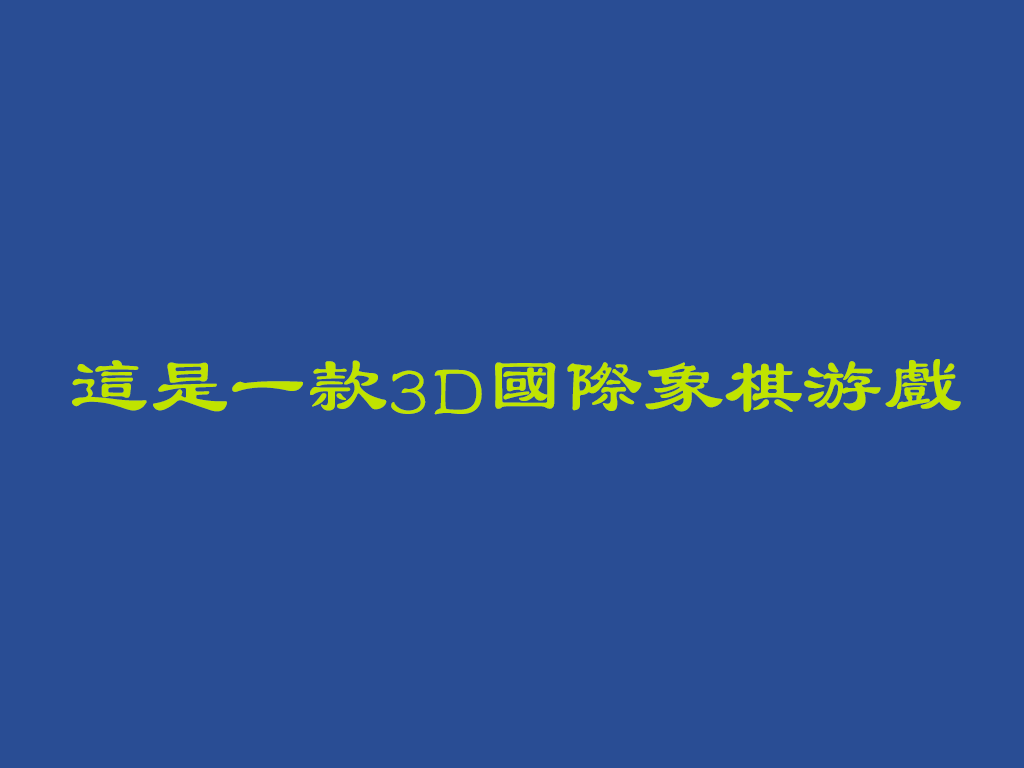
<style>
.page{position:relative;width:1024px;height:768px;background:#294d94}
.page>*{position:absolute;margin:0}
.t1{font:80px "FZLSFW--GB1-0";color:#c0e300}
</style>
<div class="page">
<p class="t1" style="left:72px;top:359px;width:889px;height:56px">这是一款3D国际象棋游戏</p>
</div>
